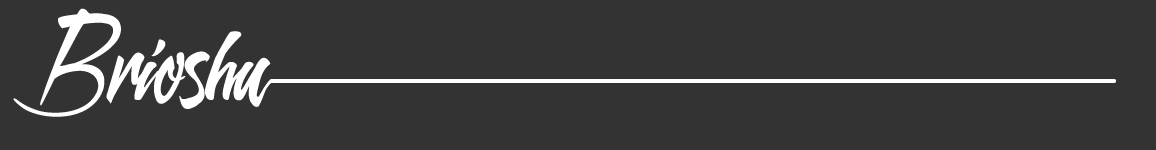
<style>
.page{position:relative;width:1156px;height:150px;background:#333333}
.page>*{position:absolute;margin:0}
.t1{font:225px "Sanctuaire-du-Machiniste";color:#ffffff}
</style>
<div class="page">
<p class="t1" style="left:13px;top:8px;width:259px;height:109px">Brioshu</p>
</div>
